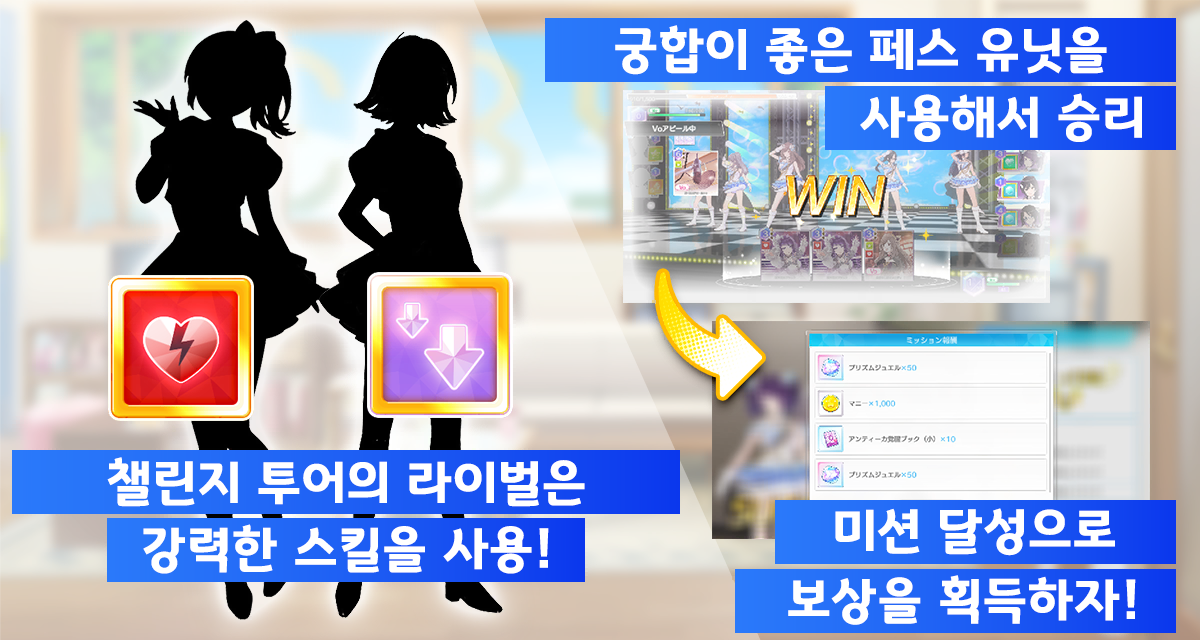
<style>
.page{position:relative;width:1200px;height:640px}
.page>*{position:absolute;margin:0}
.t1{font:50.7px "GyeonggiTitleB";letter-spacing:0.03em;color:#ffffff}
</style>
<div class="page">
<p class="t1" style="left:615px;top:25px;width:492px;height:50px">궁합이 좋은 페스 유닛을</p>
<p class="t1" style="left:860px;top:93px;width:282px;height:49px">사용해서 승리</p>
<p class="t1" style="left:107px;top:457px;width:478px;height:50px">챌린지 투어의 라이벌은</p>
<p class="t1" style="left:835px;top:508px;width:280px;height:48px">미션 달성으로</p>
<p class="t1" style="left:143px;top:524px;width:406px;height:50px">강력한 스킬을 사용!</p>
<p class="t1" style="left:788px;top:575px;width:348px;height:50px">보상을 획득하자!</p>
</div>
